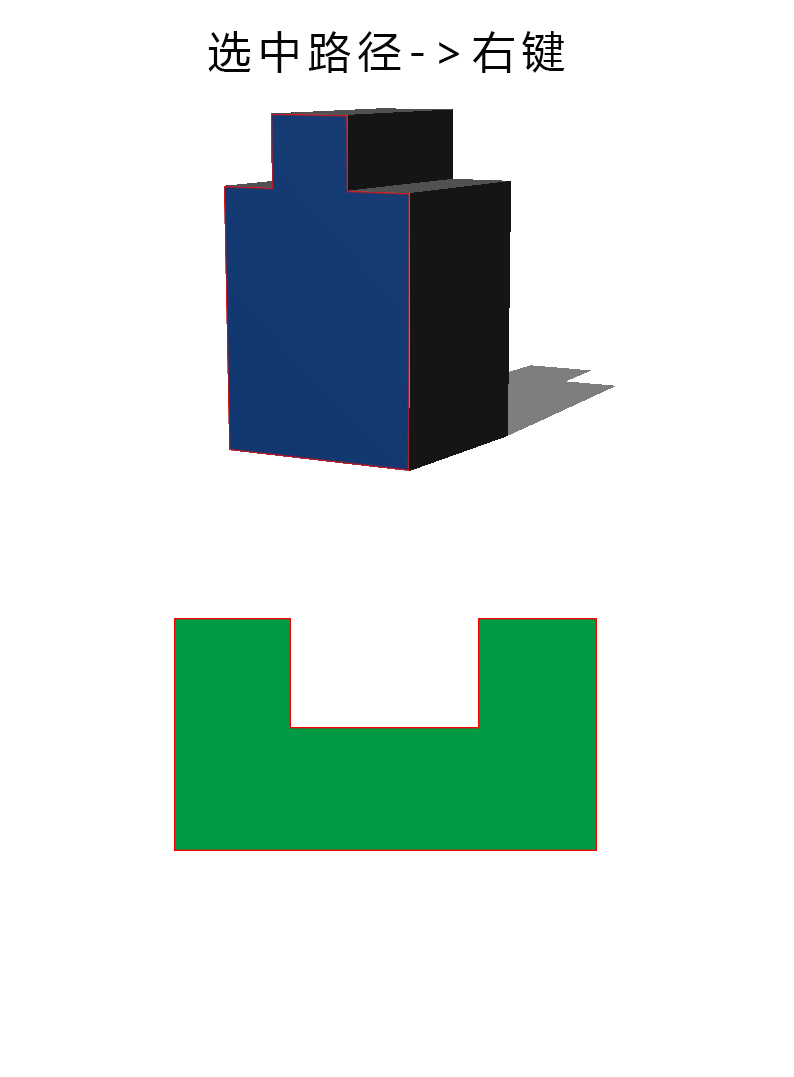
<style>
.page{position:relative;width:794px;height:1077px;background:#ffffff}
.page>*{position:absolute;margin:0}
.t1{font:43.1px "MicrosoftYaHei";letter-spacing:0.16em;color:#060606}
</style>
<div class="page">
<p class="t1" style="left:208px;top:31px;width:357px;height:42px">选中路径-&gt;右键</p>
</div>
